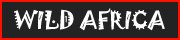
<style>
.page{position:relative;width:180px;height:40px;background:#232323}
.page>*{position:absolute;margin:0}
.t1{font:22px "Jokerman-Regular";color:#ffffff}
</style>
<div class="page">
<p class="t1" style="left:14px;top:8px;width:151px;height:23px">WILD AFRICA</p>
</div>
